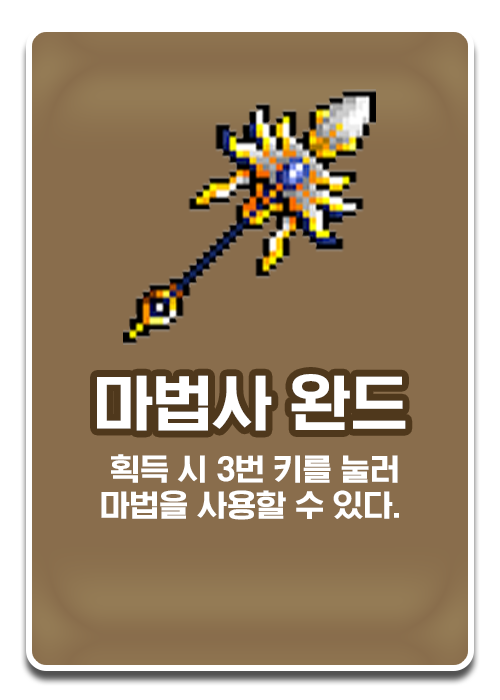
<style>
.page{position:relative;width:500px;height:700px;background:#896d4c}
.page>*{position:absolute;margin:0}
.t1{font:60px "KoreanSWGI3-R";color:#ffffff}
.t2{font:30px/36px "KoreanSWGI3-R";color:#ffffff}
</style>
<div class="page">
<p class="t1" style="left:97px;top:374px;width:309px;height:57px">마법사 완드</p>
<p class="t2" style="left:101px;top:454px;width:298px;height:66px;text-align:center">획득 시 3번 키를 눌러<br>마법을 사용할 수 있다.</p>
</div>
